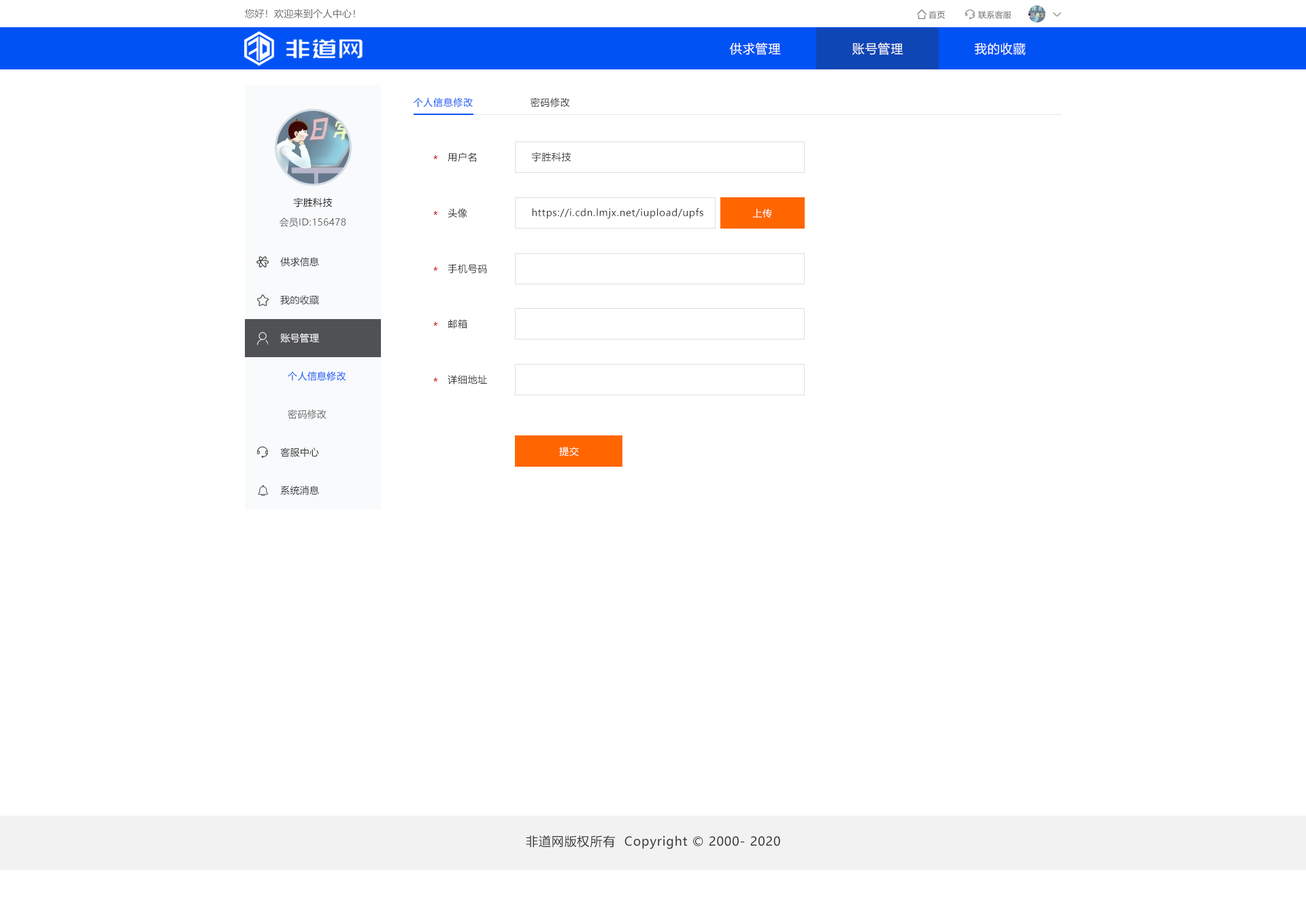
<style>
.page{position:relative;width:1306px;height:913px;background:#ffffff}
.page>*{position:absolute;margin:0}
.t1{font:9.5px "MicrosoftYaHei";letter-spacing:0.022em;color:#666666}
.t2{font:8.2px "MicrosoftYaHei";letter-spacing:0.022em;color:#666666}
.t3{font:12.2px "MicrosoftYaHei";letter-spacing:0.05em;color:#ffffff}
.t4{font:9.5px "MicrosoftYaHei";letter-spacing:0.05em;color:#0152f5}
.t5{font:9.5px "MicrosoftYaHei";letter-spacing:0.05em;color:#333333}
.t6{font:9.5px "MicrosoftYaHei";letter-spacing:0.022em;color:#141414}
.t7{font:9.5px "MicrosoftYaHei";letter-spacing:0.05em;color:#ffffff}
.t8{font:9.5px "MicrosoftYaHei";letter-spacing:0.022em;color:#333333}
.t9{font:9.5px "MicrosoftYaHei";letter-spacing:0.022em;color:#ffffff}
.t10{font:9.5px "MicrosoftYaHei";letter-spacing:0.022em;color:#0152f5}
.t11{font:12.2px "MicrosoftYaHei";letter-spacing:0.05em;color:#333333}
</style>
<div class="page">
<p class="t1" style="left:245px;top:9px;width:110px;height:9px">您好！欢迎来到个人中心！</p>
<p class="t2" style="left:929px;top:11px;width:16px;height:8px">首页</p>
<p class="t2" style="left:978px;top:11px;width:34px;height:8px">联系客服</p>
<p class="t3" style="left:729px;top:42px;width:52px;height:13px">供求管理</p>
<p class="t3" style="left:852px;top:42px;width:51px;height:13px">账号管理</p>
<p class="t3" style="left:975px;top:43px;width:51px;height:12px">我的收藏</p>
<p class="t4" style="left:413px;top:97px;width:60px;height:10px">个人信息修改</p>
<p class="t5" style="left:531px;top:97px;width:39px;height:10px">密码修改</p>
<p class="t5" style="left:448px;top:152px;width:28px;height:10px">用户名</p>
<p class="t5" style="left:531px;top:152px;width:40px;height:10px">宇胜科技</p>
<p class="t6" style="left:293px;top:197px;width:40px;height:10px">宇胜科技</p>
<p class="t5" style="left:448px;top:208px;width:19px;height:10px">头像</p>
<p class="t5" style="left:532px;top:208px;width:171px;height:11px">https://i.cdn.lmjx.net/iupload/upfs</p>
<p class="t7" style="left:752px;top:209px;width:20px;height:9px">上传</p>
<p class="t1" style="left:280px;top:218px;width:66px;height:9px">会员ID:156478</p>
<p class="t8" style="left:280px;top:257px;width:39px;height:10px">供求信息</p>
<p class="t5" style="left:448px;top:264px;width:39px;height:9px">手机号码</p>
<p class="t8" style="left:280px;top:295px;width:39px;height:10px">我的收藏</p>
<p class="t5" style="left:448px;top:319px;width:19px;height:10px">邮箱</p>
<p class="t9" style="left:280px;top:333px;width:39px;height:10px">账号管理</p>
<p class="t10" style="left:288px;top:371px;width:58px;height:10px">个人信息修改</p>
<p class="t5" style="left:448px;top:375px;width:39px;height:9px">详细地址</p>
<p class="t1" style="left:288px;top:410px;width:39px;height:9px">密码修改</p>
<p class="t8" style="left:280px;top:448px;width:39px;height:9px">客服中心</p>
<p class="t7" style="left:559px;top:447px;width:20px;height:9px">提交</p>
<p class="t8" style="left:280px;top:486px;width:39px;height:9px">系统消息</p>
<p class="t11" style="left:526px;top:835px;width:254px;height:14px">非道网版权所有  Copyright © 2000- 2020</p>
</div>
